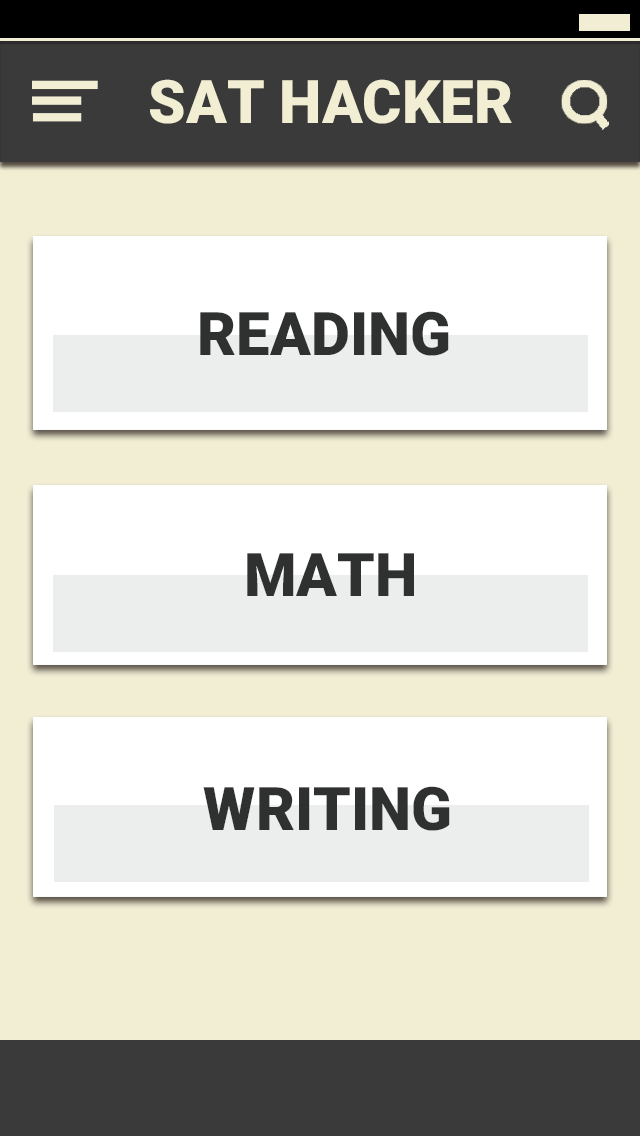
<style>
.page{position:relative;width:640px;height:1136px;background:#f1eed4}
.page>*{position:absolute;margin:0}
.t1{font:60px "Roboto-Black";color:#f1eed4;text-transform:uppercase}
.t2{font:60px "Roboto-Black";color:#2f3131;text-transform:uppercase}
</style>
<div class="page">
<p class="t1" style="left:150px;top:79px;width:362px;height:45px">SAT Hacker</p>
<p class="t2" style="left:200px;top:311px;width:249px;height:45px">Reading</p>
<p class="t2" style="left:247px;top:553px;width:167px;height:43px">Math</p>
<p class="t2" style="left:203px;top:786px;width:247px;height:45px">Writing</p>
</div>
